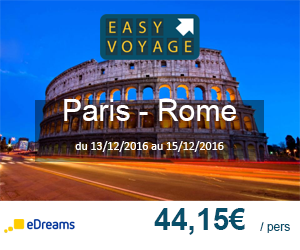
<style>
.page{position:relative;width:300px;height:250px}
.page>*{position:absolute;margin:0}
.t1{font:12px "Calibri";color:#ffffff}
.t2{font:30px "ArialMT";color:#ffffff}
.t3{font:30px "Arial-BoldMT";color:#084f6a}
.t4{font:12px "ArialMT";color:#084f6a}
</style>
<div class="page">
<p class="t1" style="left:64px;top:99px;width:172px;height:53px;text-align:center"><span class="t2">Paris - Rome<br></span><br>du 2016/12/13 au 2016/12/15</p>
<p class="t3" style="left:154px;top:208px;width:91px;height:27px">44,15€</p>
<p class="t4" style="left:260px;top:222px;width:30px;height:11px">pers /</p>
</div>
